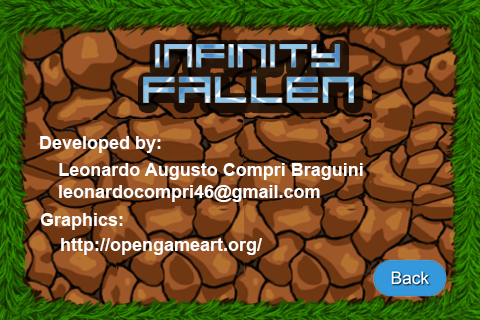
<style>
.page{position:relative;width:480px;height:320px}
.page>*{position:absolute;margin:0}
.t1{font:18px "Arial-BoldMT";color:#ffffff}
</style>
<div class="page">
<p class="t1" style="left:40px;top:136px;width:121px;height:17px">Developed by:</p>
<p class="t1" style="left:59px;top:163px;width:304px;height:17px">Leonardo Augusto Compri Braguini</p>
<p class="t1" style="left:59px;top:185px;width:261px;height:17px">leonardocompri46@gmail.com</p>
<p class="t1" style="left:40px;top:213px;width:83px;height:17px">Graphics:</p>
<p class="t1" style="left:61px;top:238px;width:201px;height:17px">http://opengameart.org/</p>
</div>
